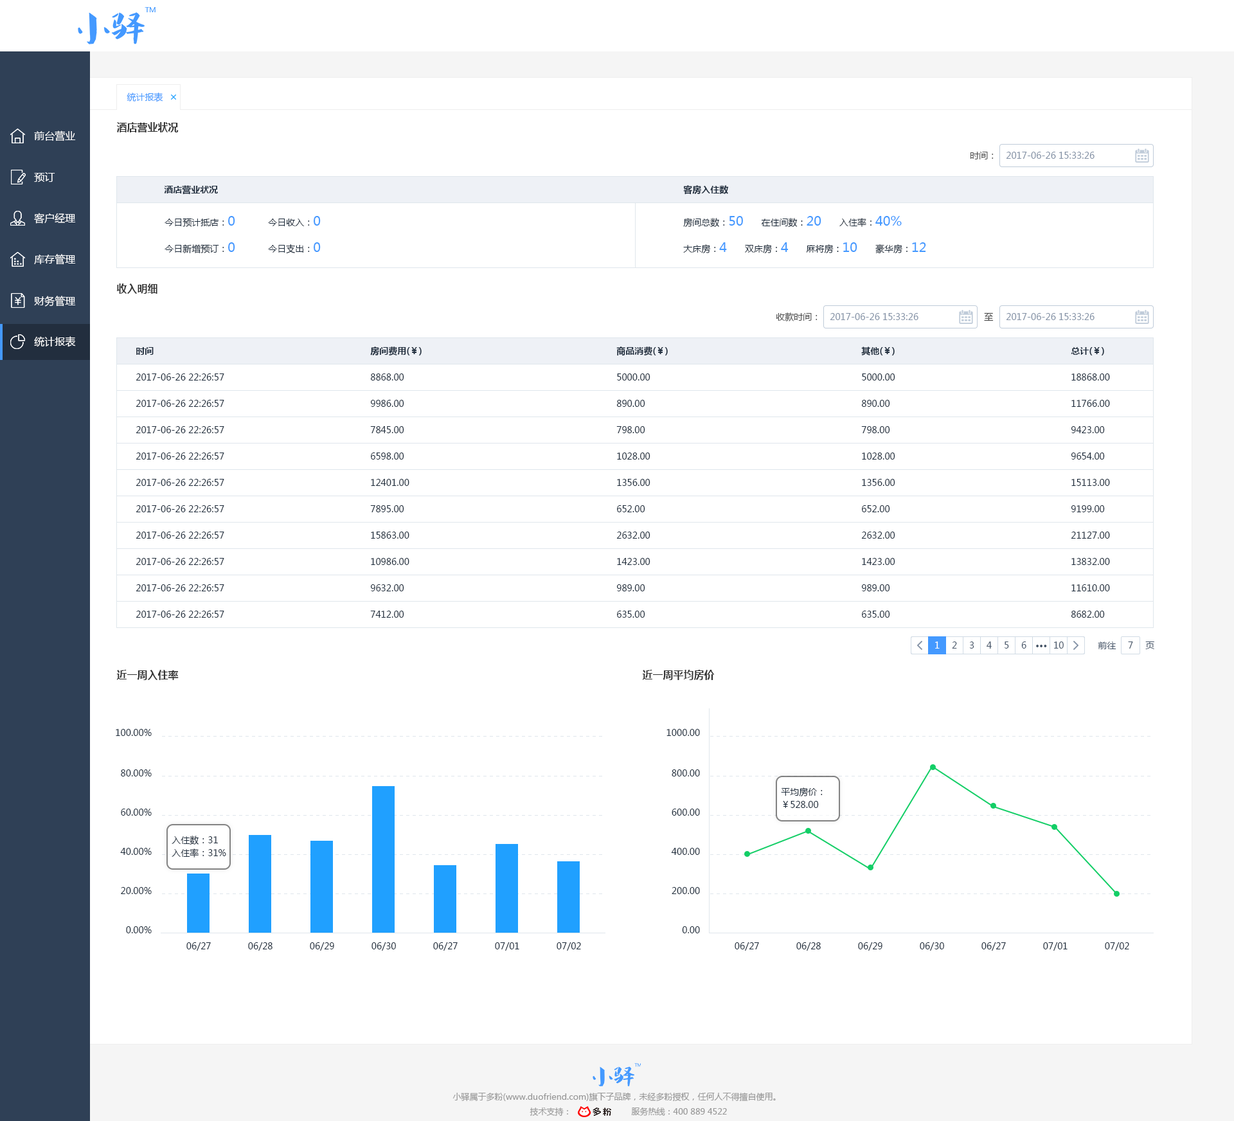
<style>
.page{position:relative;width:1234px;height:1121px;background:#ffffff}
.page>*{position:absolute;margin:0}
.t1{font:9px "MicrosoftYaHei";color:#4499ff}
.t2{font:10.3px "MicrosoftYaHei-Bold";color:#333333}
.t3{font:10.3px "MicrosoftYaHei";color:#ffffff}
.t4{font:9px "MicrosoftYaHei";color:#505050}
.t5{font:9px "MicrosoftYaHei";color:#8391a5}
.t6{font:9px "MicrosoftYaHei-Bold";color:#1f2d3d}
.t7{font:9px "MicrosoftYaHei";color:#1f2d3d}
.t8{font:12.9px "MicrosoftYaHei";color:#4499ff}
.t9{font:9px "MicrosoftYaHei";color:#ffffff}
.t10{font:9px "MicrosoftYaHei";color:#48576a}
.t11{font:9px "MicrosoftYaHei-Bold";color:#48576a}
.t12{font:9px/15.4px "MicrosoftYaHei";color:#1f2d3d}
.t13{font:8.4px "MicrosoftYaHei";color:#999999}
</style>
<div class="page">
<p class="t1" style="left:127px;top:93px;width:36px;height:9px">统计报表</p>
<p class="t2" style="left:116px;top:122px;width:63px;height:10px">酒店营业状况</p>
<p class="t3" style="left:34px;top:130px;width:42px;height:11px">前台营业</p>
<p class="t4" style="left:970px;top:152px;width:24px;height:7px">时间：</p>
<p class="t5" style="left:1006px;top:152px;width:89px;height:7px">2017-06-26 15:33:26</p>
<p class="t3" style="left:34px;top:172px;width:21px;height:10px">预订</p>
<p class="t6" style="left:164px;top:185px;width:54px;height:9px">酒店营业状况</p>
<p class="t6" style="left:683px;top:185px;width:45px;height:9px">客房入住数</p>
<p class="t3" style="left:34px;top:213px;width:42px;height:11px">客户经理</p>
<p class="t7" style="left:165px;top:216px;width:70px;height:11px">今日预计抵店：<span class="t8">0</span></p>
<p class="t7" style="left:268px;top:216px;width:53px;height:10px">今日收入：<span class="t8">0</span></p>
<p class="t7" style="left:683px;top:216px;width:219px;height:12px">房间总数：<span class="t8">50</span>　　在住间数：<span class="t8">20</span>　　入住率：<span class="t8">40%</span></p>
<p class="t7" style="left:165px;top:242px;width:70px;height:11px">今日新增预订：<span class="t8">0</span></p>
<p class="t7" style="left:268px;top:242px;width:53px;height:12px">今日支出：<span class="t8">0</span></p>
<p class="t7" style="left:683px;top:242px;width:243px;height:12px">大床房：<span class="t8">4</span>　　双床房：<span class="t8">4</span>　　麻将房：<span class="t8">10</span>　　豪华房：<span class="t8">12</span></p>
<p class="t3" style="left:34px;top:254px;width:42px;height:11px">库存管理</p>
<p class="t2" style="left:116px;top:284px;width:42px;height:10px">收入明细</p>
<p class="t3" style="left:34px;top:296px;width:42px;height:11px">财务管理</p>
<p class="t4" style="left:776px;top:312px;width:42px;height:9px">收款时间：</p>
<p class="t5" style="left:830px;top:313px;width:89px;height:7px">2017-06-26 15:33:26</p>
<p class="t4" style="left:984px;top:312px;width:10px;height:9px">至</p>
<p class="t5" style="left:1006px;top:313px;width:89px;height:7px">2017-06-26 15:33:26</p>
<p class="t3" style="left:34px;top:336px;width:42px;height:11px">统计报表</p>
<p class="t6" style="left:136px;top:347px;width:18px;height:8px">时间</p>
<p class="t6" style="left:370px;top:346px;width:52px;height:10px">房间费用(￥)</p>
<p class="t6" style="left:616px;top:346px;width:52px;height:10px">商品消费(￥)</p>
<p class="t6" style="left:861px;top:346px;width:34px;height:10px">其他(￥)</p>
<p class="t6" style="left:1071px;top:347px;width:33px;height:9px">总计(￥)</p>
<p class="t7" style="left:136px;top:374px;width:88px;height:7px">2017-06-26 22:26:57</p>
<p class="t7" style="left:370px;top:374px;width:34px;height:7px">8868.00</p>
<p class="t7" style="left:617px;top:374px;width:34px;height:7px">5000.00</p>
<p class="t7" style="left:862px;top:374px;width:34px;height:7px">5000.00</p>
<p class="t7" style="left:1072px;top:374px;width:38px;height:7px">18868.00</p>
<p class="t7" style="left:136px;top:400px;width:88px;height:7px">2017-06-26 22:26:57</p>
<p class="t7" style="left:370px;top:400px;width:34px;height:7px">9986.00</p>
<p class="t7" style="left:616px;top:400px;width:29px;height:7px">890.00</p>
<p class="t7" style="left:861px;top:400px;width:29px;height:7px">890.00</p>
<p class="t7" style="left:1072px;top:400px;width:38px;height:7px">11766.00</p>
<p class="t7" style="left:136px;top:426px;width:88px;height:7px">2017-06-26 22:26:57</p>
<p class="t7" style="left:370px;top:426px;width:34px;height:7px">7845.00</p>
<p class="t7" style="left:616px;top:426px;width:29px;height:7px">798.00</p>
<p class="t7" style="left:861px;top:426px;width:29px;height:7px">798.00</p>
<p class="t7" style="left:1071px;top:426px;width:34px;height:7px">9423.00</p>
<p class="t7" style="left:136px;top:453px;width:88px;height:7px">2017-06-26 22:26:57</p>
<p class="t7" style="left:371px;top:453px;width:33px;height:7px">6598.00</p>
<p class="t7" style="left:617px;top:453px;width:34px;height:7px">1028.00</p>
<p class="t7" style="left:862px;top:453px;width:34px;height:7px">1028.00</p>
<p class="t7" style="left:1071px;top:453px;width:34px;height:7px">9654.00</p>
<p class="t7" style="left:136px;top:479px;width:88px;height:7px">2017-06-26 22:26:57</p>
<p class="t7" style="left:371px;top:479px;width:39px;height:7px">12401.00</p>
<p class="t7" style="left:617px;top:479px;width:34px;height:7px">1356.00</p>
<p class="t7" style="left:862px;top:479px;width:34px;height:7px">1356.00</p>
<p class="t7" style="left:1072px;top:479px;width:38px;height:7px">15113.00</p>
<p class="t7" style="left:136px;top:505px;width:88px;height:7px">2017-06-26 22:26:57</p>
<p class="t7" style="left:370px;top:505px;width:34px;height:7px">7895.00</p>
<p class="t7" style="left:617px;top:505px;width:28px;height:7px">652.00</p>
<p class="t7" style="left:862px;top:505px;width:28px;height:7px">652.00</p>
<p class="t7" style="left:1071px;top:505px;width:34px;height:7px">9199.00</p>
<p class="t7" style="left:136px;top:532px;width:88px;height:7px">2017-06-26 22:26:57</p>
<p class="t7" style="left:371px;top:532px;width:39px;height:7px">15863.00</p>
<p class="t7" style="left:616px;top:532px;width:35px;height:7px">2632.00</p>
<p class="t7" style="left:861px;top:532px;width:35px;height:7px">2632.00</p>
<p class="t7" style="left:1071px;top:532px;width:39px;height:7px">21127.00</p>
<p class="t7" style="left:136px;top:558px;width:88px;height:7px">2017-06-26 22:26:57</p>
<p class="t7" style="left:371px;top:558px;width:39px;height:7px">10986.00</p>
<p class="t7" style="left:617px;top:558px;width:34px;height:7px">1423.00</p>
<p class="t7" style="left:862px;top:558px;width:34px;height:7px">1423.00</p>
<p class="t7" style="left:1072px;top:558px;width:38px;height:7px">13832.00</p>
<p class="t7" style="left:136px;top:584px;width:88px;height:7px">2017-06-26 22:26:57</p>
<p class="t7" style="left:370px;top:584px;width:34px;height:7px">9632.00</p>
<p class="t7" style="left:616px;top:584px;width:29px;height:7px">989.00</p>
<p class="t7" style="left:861px;top:584px;width:29px;height:7px">989.00</p>
<p class="t7" style="left:1072px;top:584px;width:38px;height:7px">11610.00</p>
<p class="t7" style="left:136px;top:611px;width:88px;height:7px">2017-06-26 22:26:57</p>
<p class="t7" style="left:370px;top:611px;width:34px;height:7px">7412.00</p>
<p class="t7" style="left:617px;top:611px;width:28px;height:7px">635.00</p>
<p class="t7" style="left:862px;top:611px;width:28px;height:7px">635.00</p>
<p class="t7" style="left:1071px;top:611px;width:34px;height:7px">8682.00</p>
<p class="t9" style="left:935px;top:642px;width:5px;height:7px">1</p>
<p class="t10" style="left:952px;top:642px;width:5px;height:7px">2</p>
<p class="t10" style="left:969px;top:642px;width:6px;height:7px">3</p>
<p class="t10" style="left:987px;top:642px;width:5px;height:7px">4</p>
<p class="t10" style="left:1005px;top:642px;width:4px;height:7px">5</p>
<p class="t10" style="left:1022px;top:642px;width:5px;height:7px">6</p>
<p class="t10" style="left:1054px;top:642px;width:10px;height:7px">10</p>
<p class="t10" style="left:1098px;top:642px;width:19px;height:7px">前往</p>
<p class="t10" style="left:1128px;top:642px;width:5px;height:7px">7</p>
<p class="t10" style="left:1146px;top:642px;width:9px;height:7px">页</p>
<p class="t11" style="left:1036px;top:645px;width:11px;height:2px">···</p>
<p class="t2" style="left:116px;top:670px;width:63px;height:10px">近一周入住率</p>
<p class="t2" style="left:642px;top:670px;width:73px;height:10px">近一周平均房价</p>
<p class="t7" style="left:116px;top:729px;width:36px;height:7px">100.00%</p>
<p class="t7" style="left:667px;top:729px;width:33px;height:7px">1000.00</p>
<p class="t7" style="left:121px;top:770px;width:31px;height:7px">80.00%</p>
<p class="t7" style="left:672px;top:770px;width:28px;height:7px">800.00</p>
<p class="t12" style="left:781px;top:788px;width:42px;height:20px">平均房价：<br>￥528.00</p>
<p class="t7" style="left:121px;top:809px;width:31px;height:7px">60.00%</p>
<p class="t7" style="left:672px;top:809px;width:28px;height:7px">600.00</p>
<p class="t12" style="left:172px;top:836px;width:54px;height:22px">入住数：31<br>入住率：31%</p>
<p class="t7" style="left:120px;top:848px;width:32px;height:7px">40.00%</p>
<p class="t7" style="left:671px;top:848px;width:29px;height:7px">400.00</p>
<p class="t7" style="left:121px;top:887px;width:31px;height:7px">20.00%</p>
<p class="t7" style="left:672px;top:887px;width:28px;height:7px">200.00</p>
<p class="t7" style="left:126px;top:926px;width:26px;height:7px">0.00%</p>
<p class="t7" style="left:682px;top:926px;width:18px;height:7px">0.00</p>
<p class="t7" style="left:186px;top:942px;width:25px;height:9px">06/27</p>
<p class="t7" style="left:248px;top:942px;width:25px;height:9px">06/28</p>
<p class="t7" style="left:310px;top:942px;width:24px;height:9px">06/29</p>
<p class="t7" style="left:372px;top:942px;width:24px;height:9px">06/30</p>
<p class="t7" style="left:433px;top:942px;width:25px;height:9px">06/27</p>
<p class="t7" style="left:495px;top:942px;width:24px;height:9px">07/01</p>
<p class="t7" style="left:557px;top:942px;width:24px;height:9px">07/02</p>
<p class="t7" style="left:735px;top:942px;width:24px;height:9px">06/27</p>
<p class="t7" style="left:797px;top:942px;width:24px;height:9px">06/28</p>
<p class="t7" style="left:858px;top:942px;width:25px;height:9px">06/29</p>
<p class="t7" style="left:920px;top:942px;width:24px;height:9px">06/30</p>
<p class="t7" style="left:982px;top:942px;width:24px;height:9px">06/27</p>
<p class="t7" style="left:1043px;top:942px;width:25px;height:9px">07/01</p>
<p class="t7" style="left:1105px;top:942px;width:25px;height:9px">07/02</p>
<p class="t13" style="left:453px;top:1092px;width:323px;height:9px">小驿属于多粉(www.duofriend.com)旗下子品牌，未经多粉授权，任何人不得擅自使用。</p>
<p class="t13" style="left:530px;top:1108px;width:38px;height:8px">技术支持：</p>
<p class="t13" style="left:631px;top:1108px;width:96px;height:8px">服务热线：400 889 4522</p>
</div>
